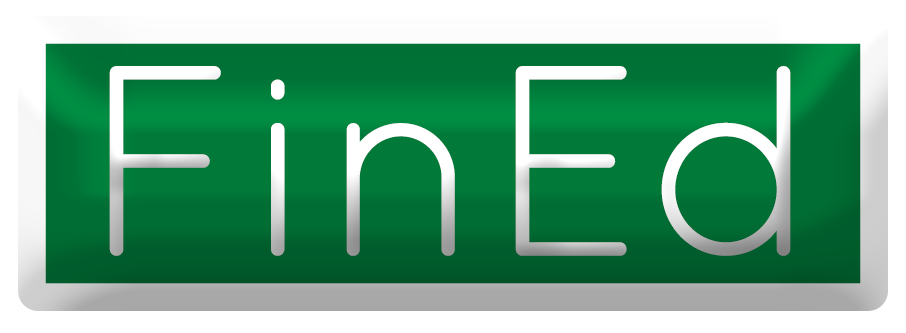
<style>
.page{position:relative;width:906px;height:333px}
.page>*{position:absolute;margin:0}
.t1{font:270.8px "Quicksand-Regular"}
</style>
<div class="page">
<p class="t1" style="left:109px;top:66px;width:682px;height:190px">FinEd</p>
</div>
